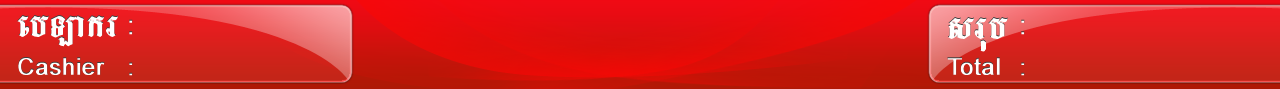
<style>
.page{position:relative;width:1280px;height:89px}
.page>*{position:absolute;margin:0}
.t1{font:56px "LimonF3";color:#ffffff;font-weight:bold}
.t2{font:26.7px "ArialMT";font-weight:bold}
.t3{font:24px "ArialMT";color:#ffffff;font-weight:bold}
.t4{font:24px "ArialMT";font-weight:bold}
</style>
<div class="page">
<p class="t1" style="left:17px;top:15px;width:101px;height:32px">ebLakr</p>
<p class="t1" style="left:948px;top:17px;width:60px;height:35px">srub</p>
<p class="t2" style="left:129px;top:19px;width:4px;height:16px">:</p>
<p class="t2" style="left:1021px;top:19px;width:4px;height:16px">:</p>
<p class="t3" style="left:18px;top:57px;width:87px;height:18px">Cashier</p>
<p class="t4" style="left:129px;top:62px;width:4px;height:14px">:</p>
<p class="t3" style="left:947px;top:57px;width:53px;height:18px">Total</p>
<p class="t4" style="left:1021px;top:62px;width:4px;height:14px">:</p>
</div>
